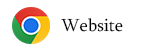
<style>
.page{position:relative;width:151px;height:50px;background:#ffffff}
.page>*{position:absolute;margin:0}
.t1{font:18px "Sylfaen";color:#000000}
</style>
<div class="page">
<p class="t1" style="left:61px;top:18px;width:62px;height:14px">Website</p>
</div>
